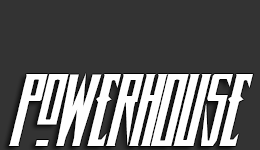
<style>
.page{position:relative;width:260px;height:150px;background:#333333}
.page>*{position:absolute;margin:0}
.t1{font:82.2px "TimberwolfItalic";color:#ffffff;scale:0.85 1}
</style>
<div class="page">
<p class="t1" style="left:8px;top:73px;width:245px;height:73px">POWErHoUsE</p>
</div>
